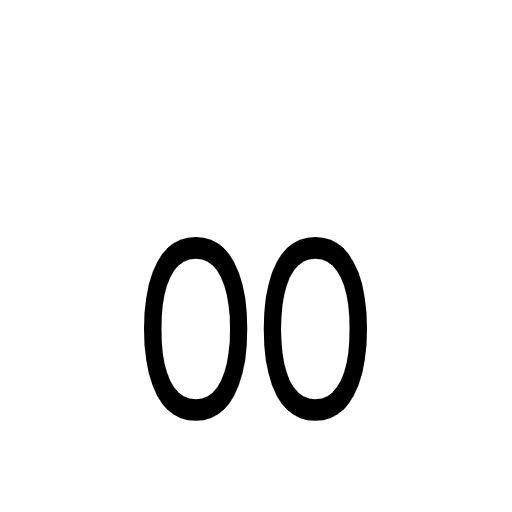
<style>
.page{position:relative;width:512px;height:512px;background:#ffffff}
.page>*{position:absolute;margin:0}
.t1{font:256px "VarelaRound-Regular";color:#000000;scale:0.74 1}
</style>
<div class="page">
<p class="t1" style="left:144px;top:237px;width:223px;height:184px">00</p>
</div>
